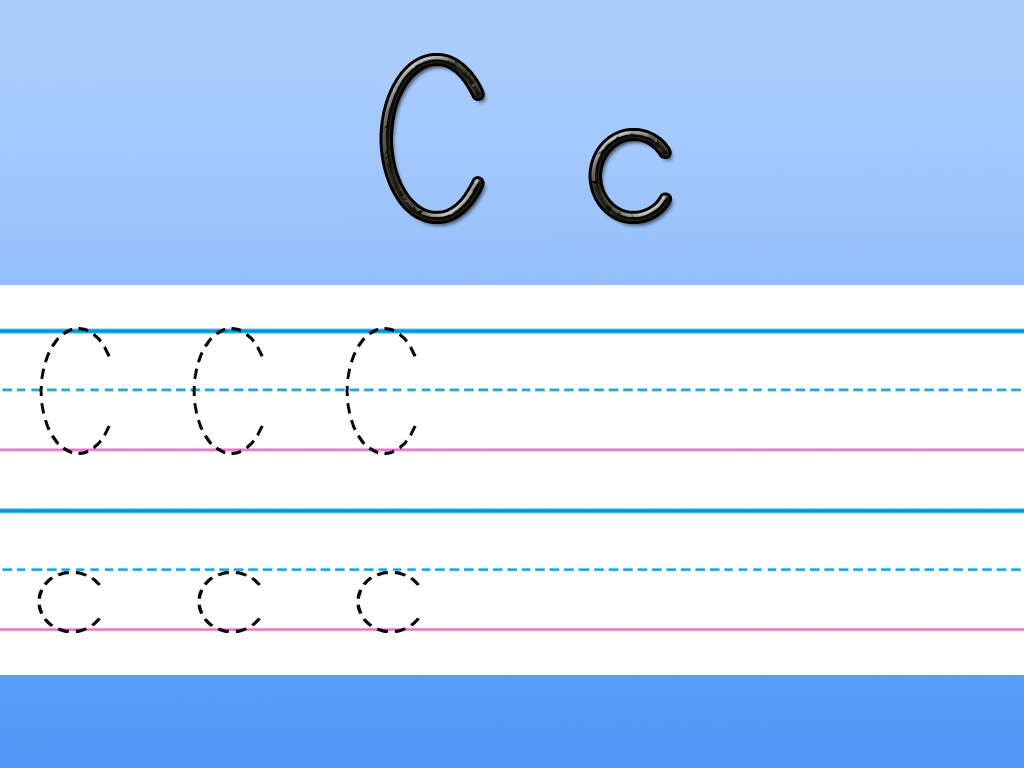
<style>
.page{position:relative;width:1024px;height:768px;background:#ffffff}
.page>*{position:absolute;margin:0}
.t1{font:260px "PrintClearly"}
.t2{font:205.6px "PrintDashed";color:#080808;scale:0.94 1}
.t3{font:187.6px "PrintDashed";color:#080808;scale:1.2 1}
</style>
<div class="page">
<p class="t1" style="left:382px;top:56px;width:288px;height:165px">C c</p>
<p class="t2" style="left:39px;top:327px;width:378px;height:128px">C C C</p>
<p class="t3" style="left:37px;top:571px;width:383px;height:62px">c c c</p>
</div>
